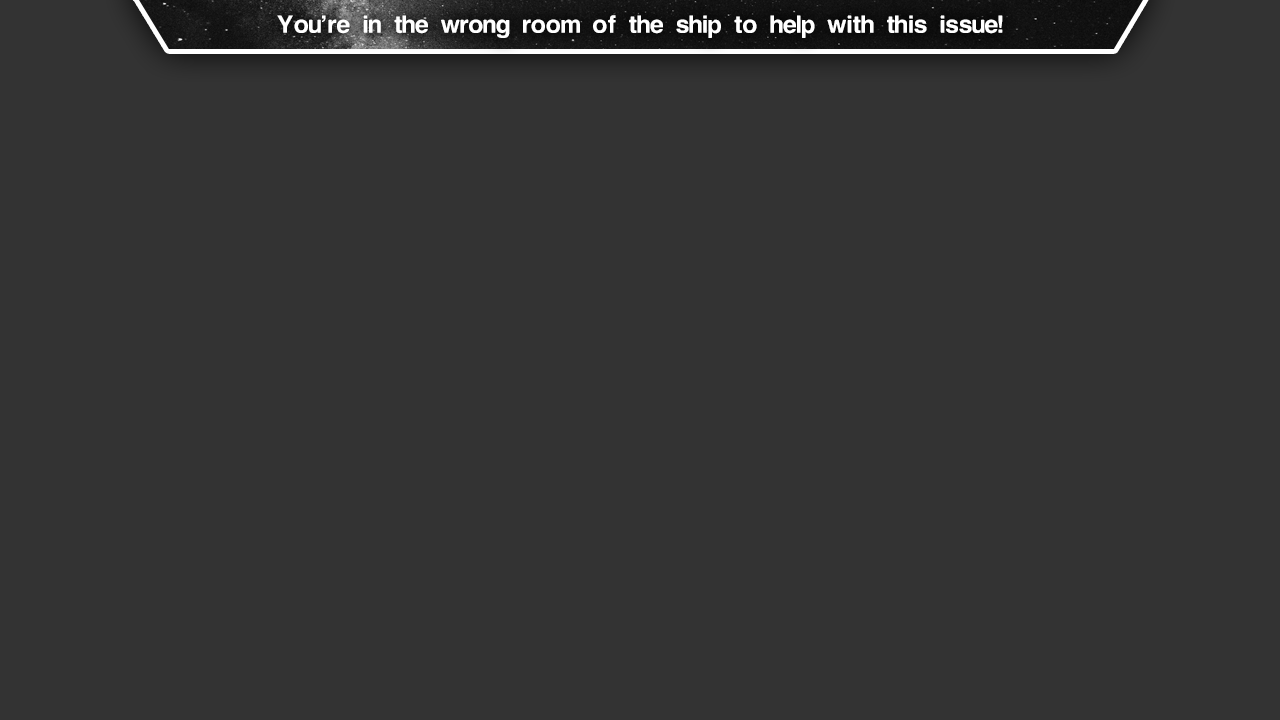
<style>
.page{position:relative;width:1280px;height:720px;background:#333333}
.page>*{position:absolute;margin:0}
.t1{font:25px "Isolation";color:#ffffff}
</style>
<div class="page">
<p class="t1" style="left:277px;top:15px;width:726px;height:23px">You’re in the wrong room of the ship to help with this issue!</p>
</div>
